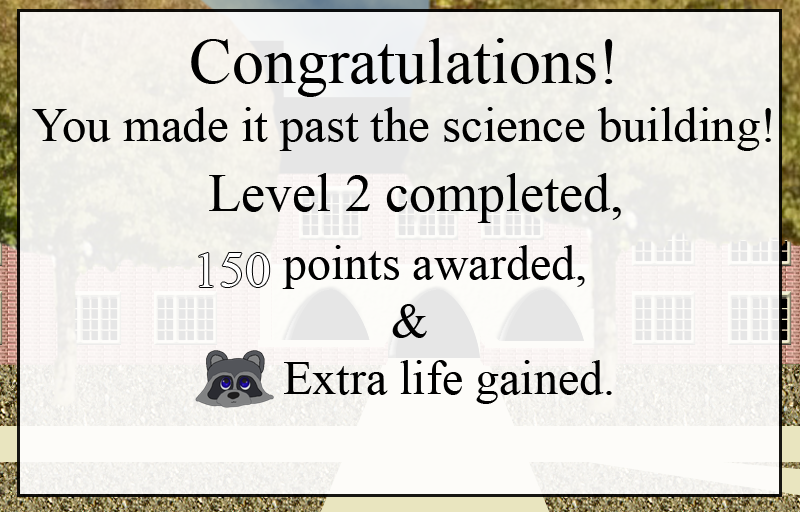
<style>
.page{position:relative;width:800px;height:512px}
.page>*{position:absolute;margin:0}
.t1{font:48.7px "TimesNewRomanPSMT";color:#000000}
.t2{font:64px "TimesNewRomanPSMT";color:#000000}
.t3{font:54px "TimesNewRomanPSMT";color:#000000}
.t4{font:48px "TimesNewRomanPSMT";color:#000000}
</style>
<div class="page">
<p class="t1" style="left:32px;top:38px;width:739px;height:113px;text-align:center"><span class="t2">Congratulations!<br></span>You made it past the science building!</p>
<p class="t3" style="left:209px;top:173px;width:412px;height:50px">Level 2 completed,</p>
<p class="t4" style="left:282px;top:245px;width:330px;height:159px">points awarded,<br>   &amp;<br>Extra life gained.</p>
</div>
